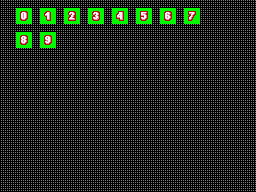
<style>
.page{position:relative;width:256px;height:192px;background:#000000}
.page>*{position:absolute;margin:0}
.t1{font:8px "PixelOperatorMono8-Bold";color:#f8f8f8;scale:0.9 1}
</style>
<div class="page">
<p class="t1" style="left:21px;top:12px;width:5px;height:7px">0</p>
<p class="t1" style="left:93px;top:12px;width:5px;height:7px">3</p>
<p class="t1" style="left:117px;top:12px;width:5px;height:7px">4</p>
<p class="t1" style="left:141px;top:12px;width:5px;height:7px">5</p>
<p class="t1" style="left:165px;top:12px;width:5px;height:7px">6</p>
<p class="t1" style="left:189px;top:12px;width:5px;height:7px">7</p>
<p class="t1" style="left:21px;top:36px;width:5px;height:7px">8</p>
<p class="t1" style="left:45px;top:36px;width:5px;height:7px">9</p>
</div>
